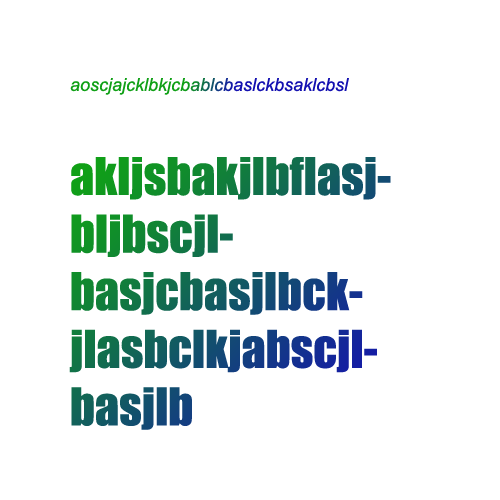
<style>
.page{position:relative;width:500px;height:500px;background:#ffffff}
.page>*{position:absolute;margin:0}
.t1{font:48px "Impact"}
</style>
<div class="page">
<p class="t1" style="left:69px;top:157px;width:322px;height:273px">akljsbakjlbflasjbljbscjlbasjcbasjlbckjlasbclkjabscjlbasjlb</p>
</div>
